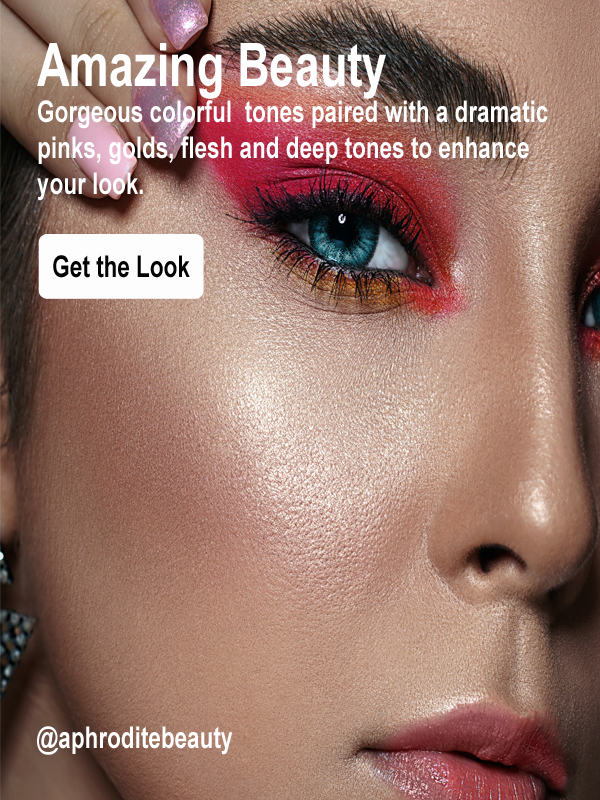
<style>
.page{position:relative;width:600px;height:800px}
.page>*{position:absolute;margin:0}
.t1{font:30px "Arial-BoldMT";color:#ffffff;scale:0.75 1}
.t2{font:60px "Arial-BoldMT";color:#ffffff;scale:0.75 1}
.t3{font:30px "Arial-BoldMT";color:#020202;scale:0.75 1}
</style>
<div class="page">
<p class="t1" style="left:37px;top:43px;width:511px;height:158px"><span class="t2">Amazing Beauty<br></span>Gorgeous colorful  tones paired with a dramatic <br>pinks, golds, flesh and deep tones to enhance <br>your look.</p>
<p class="t3" style="left:53px;top:255px;width:137px;height:23px">Get the Look</p>
<p class="t1" style="left:37px;top:726px;width:196px;height:29px">@aphroditebeauty</p>
</div>
